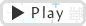
<style>
.page{position:relative;width:86px;height:26px;background:#ffffff}
.page>*{position:absolute;margin:0}
.t1{font:16px "Amira-Roman";letter-spacing:0.1em;color:#333333}
</style>
<div class="page">
<p class="t1" style="left:32px;top:6px;width:32px;height:16px">Play</p>
</div>
